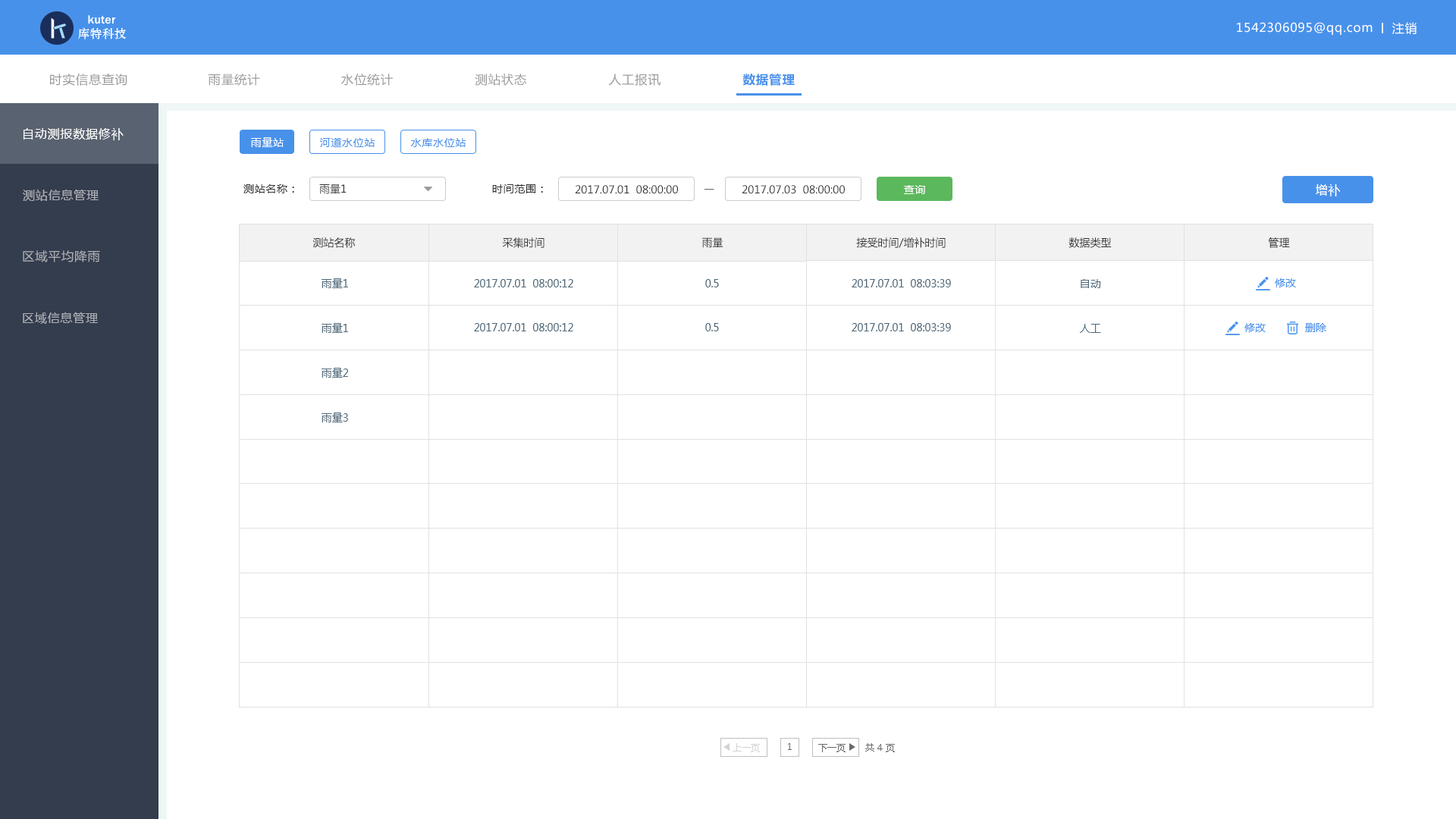
<style>
.page{position:relative;width:1456px;height:819px;background:#ffffff}
.page>*{position:absolute;margin:0}
.t1{font:12.1px "MicrosoftYaHei";letter-spacing:0.05em;color:#ffffff}
.t2{font:12.1px "MicrosoftYaHei";letter-spacing:0.05em;color:#999999}
.t3{font:12.1px "MicrosoftYaHei-Bold";letter-spacing:0.05em;color:#4891ea}
.t4{font:10.6px "MicrosoftYaHei";letter-spacing:0.05em;color:#ffffff}
.t5{font:10.6px "MicrosoftYaHei";letter-spacing:0.05em;color:#4891ea}
.t6{font:10.6px "MicrosoftYaHei";letter-spacing:0.05em;color:#333333}
.t7{font:10.6px "MicrosoftYaHei";color:#333333}
.t8{font:12.1px "MicrosoftYaHei";letter-spacing:0.05em;color:#aeb0b5}
.t9{font:10.6px "MicrosoftYaHei"}
.t10{font:10.6px "MicrosoftYaHei";color:#50697a}
.t11{font:10.6px "MicrosoftYaHei";color:#4891ea}
.t12{font:9.1px "MicrosoftYaHei";color:#d2d2d2}
.t13{font:9.1px "MicrosoftYaHei";color:#696969}
</style>
<div class="page">
<p class="t1" style="left:1237px;top:22px;width:136px;height:13px">1542306095@qq.com</p>
<p class="t1" style="left:1392px;top:22px;width:25px;height:12px">注销</p>
<p class="t2" style="left:50px;top:74px;width:77px;height:12px">时实信息查询</p>
<p class="t2" style="left:208px;top:74px;width:52px;height:12px">雨量统计</p>
<p class="t2" style="left:341px;top:74px;width:52px;height:12px">水位统计</p>
<p class="t2" style="left:475px;top:74px;width:52px;height:12px">测站状态</p>
<p class="t2" style="left:608px;top:74px;width:52px;height:12px">人工报讯</p>
<p class="t3" style="left:742px;top:74px;width:53px;height:12px">数据管理</p>
<p class="t1" style="left:24px;top:128px;width:100px;height:12px">自动测报数据修补</p>
<p class="t4" style="left:251px;top:137px;width:33px;height:10px">雨量站</p>
<p class="t5" style="left:320px;top:138px;width:55px;height:9px">河道水位站</p>
<p class="t5" style="left:411px;top:138px;width:55px;height:9px">水库水位站</p>
<p class="t6" style="left:243px;top:184px;width:51px;height:9px">测站名称：</p>
<p class="t7" style="left:319px;top:184px;width:28px;height:10px">雨量1</p>
<p class="t6" style="left:492px;top:184px;width:51px;height:9px">时间范围：</p>
<p class="t7" style="left:575px;top:185px;width:103px;height:9px">2017.07.01  08:00:00</p>
<p class="t7" style="left:742px;top:185px;width:103px;height:9px">2017.07.03  08:00:00</p>
<p class="t4" style="left:904px;top:185px;width:21px;height:9px">查询</p>
<p class="t1" style="left:1316px;top:184px;width:24px;height:12px">增补</p>
<p class="t8" style="left:23px;top:190px;width:76px;height:11px">测站信息管理</p>
<p class="t9" style="left:704px;top:189px;width:10px;height:1px">__</p>
<p class="t7" style="left:312px;top:237px;width:44px;height:11px">测站名称</p>
<p class="t7" style="left:502px;top:237px;width:42px;height:11px">采集时间</p>
<p class="t7" style="left:702px;top:237px;width:21px;height:11px">雨量</p>
<p class="t7" style="left:856px;top:237px;width:90px;height:11px">接受时间/增补时间</p>
<p class="t7" style="left:1068px;top:237px;width:44px;height:11px">数据类型</p>
<p class="t7" style="left:1268px;top:237px;width:22px;height:11px">管理</p>
<p class="t8" style="left:23px;top:250px;width:77px;height:12px">区域平均降雨</p>
<p class="t10" style="left:322px;top:278px;width:26px;height:10px">雨量1</p>
<p class="t10" style="left:474px;top:279px;width:99px;height:8px">2017.07.01  08:00:12</p>
<p class="t10" style="left:705px;top:279px;width:14px;height:8px">0.5</p>
<p class="t10" style="left:852px;top:279px;width:99px;height:8px">2017.07.01  08:03:39</p>
<p class="t10" style="left:1081px;top:279px;width:20px;height:9px">自动</p>
<p class="t11" style="left:1275px;top:278px;width:21px;height:9px">修改</p>
<p class="t8" style="left:23px;top:312px;width:75px;height:12px">区域信息管理</p>
<p class="t10" style="left:322px;top:323px;width:26px;height:10px">雨量1</p>
<p class="t10" style="left:474px;top:323px;width:99px;height:8px">2017.07.01  08:00:12</p>
<p class="t10" style="left:705px;top:323px;width:14px;height:8px">0.5</p>
<p class="t10" style="left:852px;top:323px;width:99px;height:8px">2017.07.01  08:03:39</p>
<p class="t10" style="left:1080px;top:324px;width:21px;height:9px">人工</p>
<p class="t11" style="left:1244px;top:323px;width:22px;height:9px">修改</p>
<p class="t11" style="left:1305px;top:323px;width:21px;height:9px">删除</p>
<p class="t10" style="left:322px;top:368px;width:26px;height:10px">雨量2</p>
<p class="t10" style="left:322px;top:413px;width:26px;height:9px">雨量3</p>
<p class="t12" style="left:733px;top:743px;width:27px;height:9px">上一页</p>
<p class="t13" style="left:788px;top:743px;width:4px;height:7px">1</p>
<p class="t13" style="left:818px;top:744px;width:28px;height:8px">下一页</p>
<p class="t13" style="left:865px;top:743px;width:30px;height:9px">共 4 页</p>
</div>
